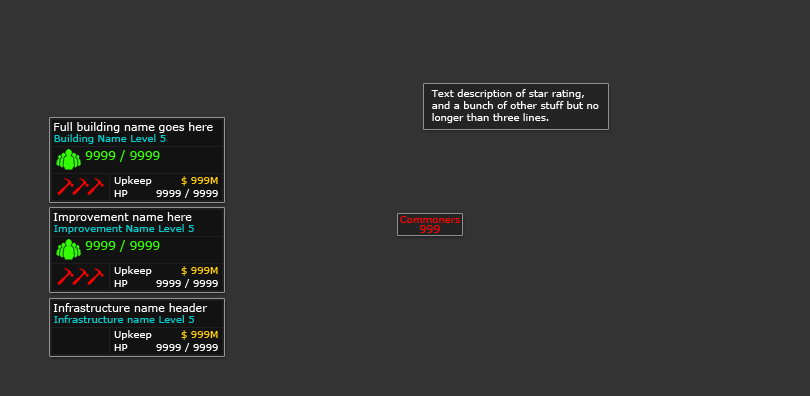
<style>
.page{position:relative;width:810px;height:396px;background:#333333}
.page>*{position:absolute;margin:0}
.t1{font:10px/12px "Verdana";color:#ffffff}
.t2{font:11px "Verdana";color:#ffffff}
.t3{font:10px "Verdana";color:#00cccc}
.t4{font:12px "Verdana";color:#33ff00}
.t5{font:10px "Verdana";color:#ffffff}
.t6{font:10px "Verdana";color:#ffcc00}
.t7{font:10px "Verdana";color:#ff0000}
.t8{font:11px "Verdana";color:#ff0000}
</style>
<div class="page">
<p class="t1" style="left:431px;top:89px;width:168px;height:34px">Text description of star rating,<br>and a bunch of other stuff but no<br>longer than three lines.</p>
<p class="t2" style="left:54px;top:122px;width:159px;height:11px">Full building name goes here</p>
<p class="t3" style="left:54px;top:134px;width:112px;height:10px">Building Name Level 5</p>
<p class="t4" style="left:85px;top:150px;width:75px;height:12px">9999 / 9999</p>
<p class="t5" style="left:114px;top:176px;width:38px;height:10px">Upkeep</p>
<p class="t6" style="left:181px;top:176px;width:37px;height:10px">$ 999M</p>
<p class="t5" style="left:114px;top:190px;width:14px;height:7px">HP</p>
<p class="t5" style="left:156px;top:189px;width:62px;height:9px">9999 / 9999</p>
<p class="t2" style="left:53px;top:212px;width:139px;height:11px">Improvement name here</p>
<p class="t7" style="left:400px;top:216px;width:60px;height:7px">Commoners</p>
<p class="t3" style="left:54px;top:224px;width:140px;height:10px">Improvement Name Level 5</p>
<p class="t8" style="left:420px;top:225px;width:20px;height:8px">999</p>
<p class="t4" style="left:85px;top:240px;width:75px;height:12px">9999 / 9999</p>
<p class="t5" style="left:114px;top:266px;width:38px;height:10px">Upkeep</p>
<p class="t6" style="left:181px;top:266px;width:37px;height:10px">$ 999M</p>
<p class="t5" style="left:114px;top:280px;width:14px;height:7px">HP</p>
<p class="t5" style="left:156px;top:279px;width:62px;height:9px">9999 / 9999</p>
<p class="t2" style="left:53px;top:303px;width:155px;height:9px">Infrastructure name header</p>
<p class="t3" style="left:54px;top:315px;width:140px;height:8px">Infrastructure name Level 5</p>
<p class="t5" style="left:114px;top:330px;width:38px;height:10px">Upkeep</p>
<p class="t6" style="left:181px;top:330px;width:37px;height:10px">$ 999M</p>
<p class="t5" style="left:114px;top:344px;width:14px;height:7px">HP</p>
<p class="t5" style="left:156px;top:343px;width:62px;height:9px">9999 / 9999</p>
</div>
